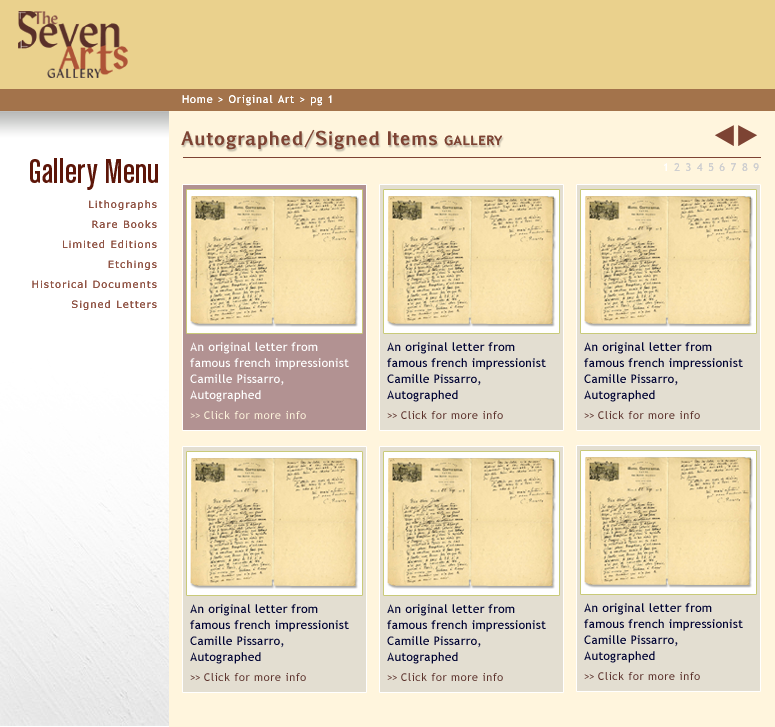
<style>
.page{position:relative;width:775px;height:727px}
.page>*{position:absolute;margin:0}
.t1{font:11px "TrebuchetMS";letter-spacing:0.075em;color:#ffffff}
.t2{font:18px "EuphemiaUCAS-Bold";letter-spacing:0.025em;color:#7d4333}
.t3{font:13px "TrebuchetMS-Bold";letter-spacing:0.05em;color:#7d4333}
.t4{font:36px "ChaletComprime-CologneSixty";letter-spacing:0.01em;color:#5d1609}
.t5{font:11px "TrebuchetMS";letter-spacing:0.5em;color:#cfcfd0}
.t6{font:11px "TrebuchetMS";letter-spacing:0.5em;color:#ffffff}
.t7{font:10px/20px "Verdana";letter-spacing:0.1em;color:#915546}
.t8{font:12px/16px "TrebuchetMS";letter-spacing:0.025em;color:#ffffff}
.t9{font:11px/20px "TrebuchetMS";letter-spacing:-0.075em;color:#fff5dd}
.t10{font:11px/20px "TrebuchetMS";letter-spacing:0.05em;color:#fff5dd}
.t11{font:12px/16px "TrebuchetMS";letter-spacing:0.025em;color:#000333}
.t12{font:11px/20px "TrebuchetMS";letter-spacing:-0.075em;color:#5a302a}
.t13{font:11px/20px "TrebuchetMS";letter-spacing:0.05em;color:#5a302a}
</style>
<div class="page">
<p class="t1" style="left:182px;top:95px;width:150px;height:11px">Home &gt; Original Art &gt; pg 1</p>
<p class="t2" style="left:181px;top:129px;width:322px;height:21px">Autographed/Signed Items <span class="t3">GALLERY</span></p>
<p class="t4" style="left:30px;top:158px;width:128px;height:32px">Gallery Menu</p>
<p class="t5" style="left:664px;top:163px;width:95px;height:8px"><span class="t6">1</span>23456789</p>
<p class="t7" style="left:32px;top:200px;width:125px;height:110px;text-align:right">Lithographs<br>Rare Books<br>Limited Editions<br>Etchings<br>Historical Documents<br>Signed Letters</p>
<p class="t8" style="left:190px;top:342px;width:159px;height:77px">An original letter from<br>famous french impressionist<br>Camille Pissarro, <br>Autographed<br><span class="t9">&gt;&gt;</span><span class="t10"> Click for more info</span></p>
<p class="t11" style="left:387px;top:342px;width:159px;height:77px">An original letter from<br>famous french impressionist<br>Camille Pissarro, <br>Autographed<br><span class="t12">&gt;&gt;</span><span class="t13"> Click for more info</span></p>
<p class="t11" style="left:584px;top:342px;width:159px;height:77px">An original letter from<br>famous french impressionist<br>Camille Pissarro, <br>Autographed<br><span class="t12">&gt;&gt;</span><span class="t13"> Click for more info</span></p>
<p class="t11" style="left:190px;top:604px;width:159px;height:77px">An original letter from<br>famous french impressionist<br>Camille Pissarro, <br>Autographed<br><span class="t12">&gt;&gt;</span><span class="t13"> Click for more info</span></p>
<p class="t11" style="left:387px;top:604px;width:159px;height:77px">An original letter from<br>famous french impressionist<br>Camille Pissarro, <br>Autographed<br><span class="t12">&gt;&gt;</span><span class="t13"> Click for more info</span></p>
<p class="t11" style="left:584px;top:603px;width:159px;height:77px">An original letter from<br>famous french impressionist<br>Camille Pissarro, <br>Autographed<br><span class="t12">&gt;&gt;</span><span class="t13"> Click for more info</span></p>
</div>
